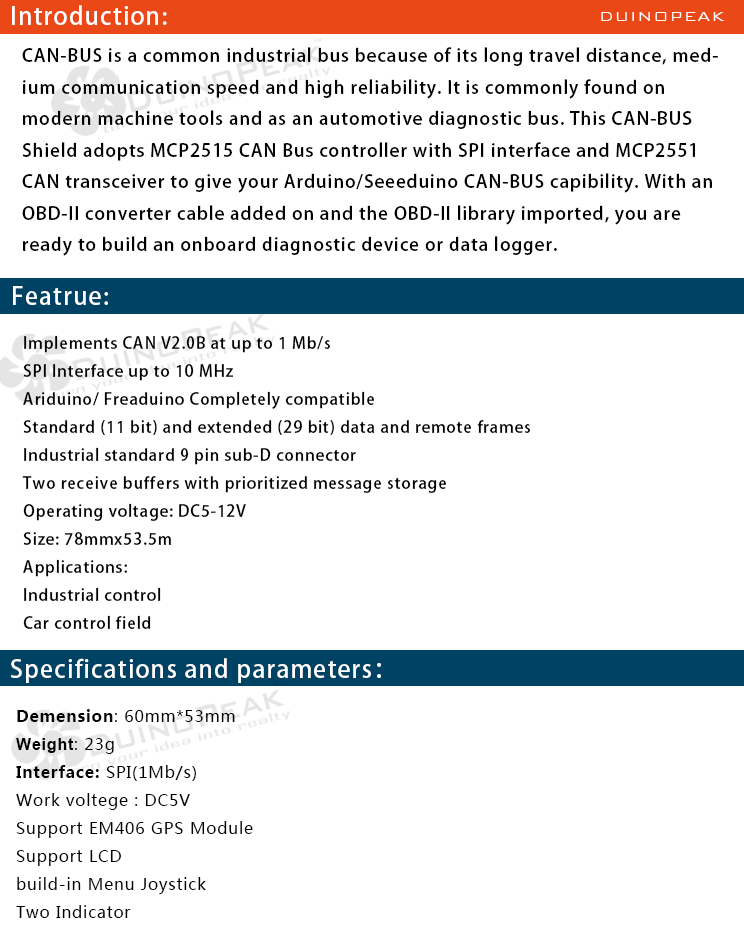
<style>
.page{position:relative;width:744px;height:936px;background:#ffffff}
.page>*{position:absolute;margin:0}
.t1{font:24px "AdobeHeitiStd-Regular";letter-spacing:0.05em;color:#ffffff}
.t2{font:18px "BankGothicBT-Light";letter-spacing:0.05em;color:#ffffff}
.t3{font:18px "AdobeHeitiStd-Regular";letter-spacing:0.05em;color:#000000}
.t4{font:16px "AdobeHeitiStd-Regular";letter-spacing:0.05em;color:#000000}
.t5{font:16px "MicrosoftYaHei";letter-spacing:0.05em;color:#000000}
.t6{font:16px "MicrosoftYaHei-Bold";letter-spacing:0.05em;color:#000000}
.t7{font:16px "Arial-BoldMT";letter-spacing:0.05em;color:#000000}
</style>
<div class="page">
<p class="t1" style="left:12px;top:5px;width:155px;height:20px">Introduction:</p>
<p class="t2" style="left:601px;top:12px;width:124px;height:9px">DUINOPEAK</p>
<p class="t3" style="left:22px;top:47px;width:696px;height:209px">CAN-BUS is a common industrial bus because of its long travel distance, med-<br>ium communication speed and high reliability. It is commonly found on <br>modern machine tools and as an automotive diagnostic bus. This CAN-BUS <br>Shield adopts MCP2515 CAN Bus controller with SPI interface and MCP2551 <br>CAN transceiver to give your Arduino/Seeeduino CAN-BUS capibility. With an <br>OBD-II converter cable added on and the OBD-II library imported, you are <br>ready to build an onboard diagnostic device or data logger.</p>
<p class="t1" style="left:13px;top:286px;width:95px;height:19px">Featrue:</p>
<p class="t4" style="left:22px;top:335px;width:508px;height:294px">Implements CAN V2.0B at up to 1 Mb/s<br>SPI Interface up to 10 MHz<br>Ariduino/ Freaduino Completely compatible<br>Standard (11 bit) and extended (29 bit) data and remote frames<br>Industrial standard 9 pin sub-D connector<br>Two receive buffers with prioritized message storage<br>Operating voltage: DC5-12V<br>Size: 78mmx53.5m<br>Applications:<br>Industrial control<br>Car control field</p>
<p class="t1" style="left:11px;top:658px;width:370px;height:25px">Specifications and parameters：</p>
<p class="t5" style="left:16px;top:709px;width:237px;height:209px"><span class="t6">Demension</span>: 60mm*53mm<br><span class="t7">Weight</span>: 23g<br><span class="t6">Interface: </span>SPI(1Mb/s)<br>Work voltege : DC5V<br>Support EM406 GPS Module<br>Support LCD <br>build-in Menu Joystick <br>Two Indicator</p>
</div>
